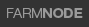
<style>
.page{position:relative;width:89px;height:27px;background:#333333}
.page>*{position:absolute;margin:0}
.t1{font:14px "HelveticaNeueLTStd-Lt";letter-spacing:-0.02em;color:#9a9a9a}
.t2{font:14px "HelveticaNeueLTStd-Bd";letter-spacing:-0.02em;color:#9a9a9a}
</style>
<div class="page">
<p class="t1" style="left:7px;top:8px;width:76px;height:10px">FARM<span class="t2">NODE</span></p>
</div>
